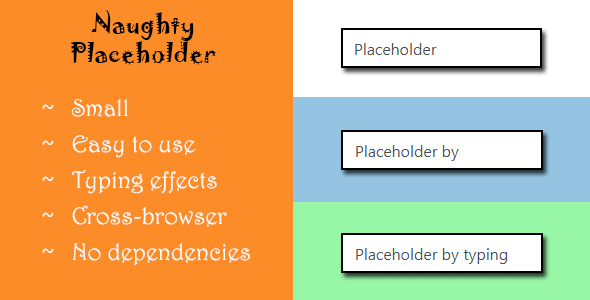
<style>
.page{position:relative;width:590px;height:300px;background:#fb8c28}
.page>*{position:absolute;margin:0}
.t1{font:24px "Jokerman-Regular";color:#000000}
.t2{font:24px/36px "Harrington";color:#f9f9f9}
</style>
<div class="page">
<p class="t1" style="left:71px;top:10px;width:145px;height:55px;text-align:center">Naughty<br>Placeholder</p>
<p class="t2" style="left:42px;top:98px;width:208px;height:168px">~   Small<br>~   Easy to use<br>~   Typing effects<br>~   Cross-browser<br>~   No dependencies</p>
</div>
